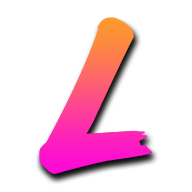
<style>
.page{position:relative;width:192px;height:192px;background:#ffffff}
.page>*{position:absolute;margin:0}
.t1{font:176.2px "lazer84"}
</style>
<div class="page">
<p class="t1" style="left:39px;top:17px;width:114px;height:157px">L</p>
<p class="t1" style="left:39px;top:17px;width:114px;height:157px">L</p>
</div>
